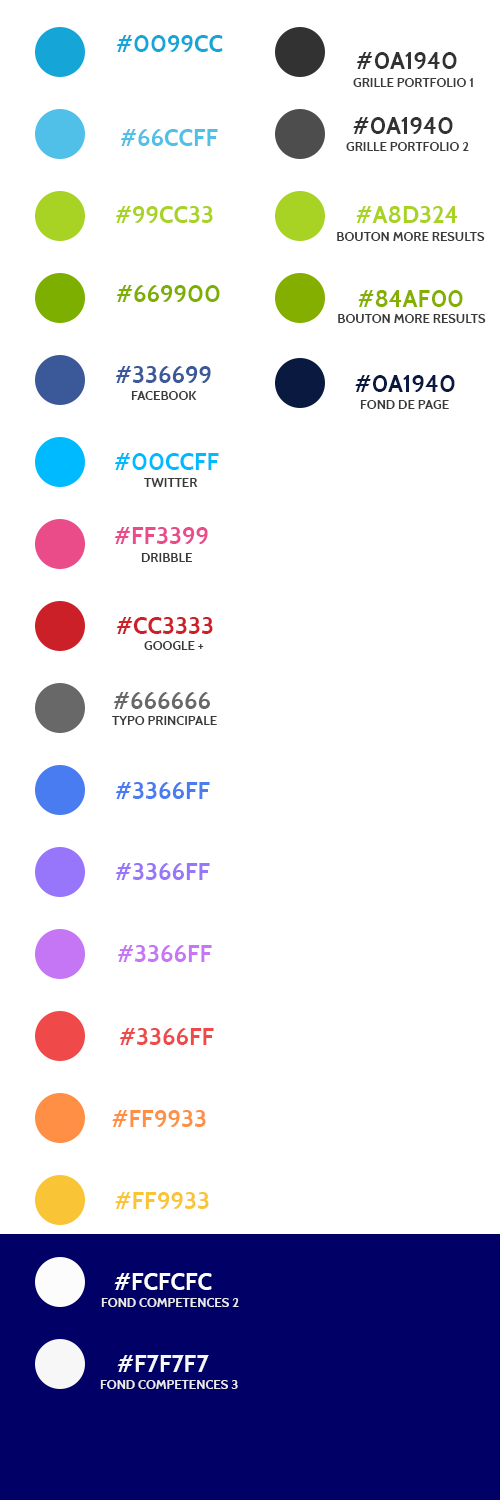
<style>
.page{position:relative;width:500px;height:1500px;background:#ffffff}
.page>*{position:absolute;margin:0}
.t1{font:24px "Cabin-Bold";color:#15a5d7;text-transform:uppercase}
.t2{font:24px "Cabin-Bold";color:#323232;text-transform:uppercase}
.t3{font:13px "Cabin-Bold";color:#3a3a3a;text-transform:uppercase}
.t4{font:24px "Cabin-Bold";color:#50c0e8;text-transform:uppercase}
.t5{font:24px "Cabin-Bold";color:#a8d324;text-transform:uppercase}
.t6{font:24px "Cabin-Bold";color:#7daf00;text-transform:uppercase}
.t7{font:24px "Cabin-Bold";color:#84af00;text-transform:uppercase}
.t8{font:24px "Cabin-Bold";color:#3b5999;text-transform:uppercase}
.t9{font:24px "Cabin-Bold";color:#0a1940;text-transform:uppercase}
.t10{font:24px "Cabin-Bold";color:#00baff;text-transform:uppercase}
.t11{font:24px "Cabin-Bold";color:#ea4c89;text-transform:uppercase}
.t12{font:24px "Cabin-Bold";color:#cb2028;text-transform:uppercase}
.t13{font:24px "Cabin-Bold";color:#686868;text-transform:uppercase}
.t14{font:24px "Cabin-Bold";color:#497cf1;text-transform:uppercase}
.t15{font:24px "Cabin-Bold";color:#9776fb;text-transform:uppercase}
.t16{font:24px "Cabin-Bold";color:#c576f5;text-transform:uppercase}
.t17{font:24px "Cabin-Bold";color:#ef4949;text-transform:uppercase}
.t18{font:24px "Cabin-Bold";color:#ff8f45;text-transform:uppercase}
.t19{font:24px "Cabin-Bold";color:#f9c436;text-transform:uppercase}
.t20{font:24px "Cabin-Bold";color:#fcfcfc;text-transform:uppercase}
.t21{font:13px "Cabin-Bold";color:#eaeaea;text-transform:uppercase}
.t22{font:24px "Cabin-Bold";color:#f7f7f7;text-transform:uppercase}
</style>
<div class="page">
<p class="t1" style="left:116px;top:35px;width:107px;height:17px">#0099cc</p>
<p class="t2" style="left:356px;top:52px;width:101px;height:17px">#0a1940</p>
<p class="t3" style="left:353px;top:78px;width:120px;height:9px">grille portfolio 1</p>
<p class="t2" style="left:353px;top:117px;width:100px;height:17px">#0a1940</p>
<p class="t4" style="left:120px;top:129px;width:98px;height:17px">#66ccff</p>
<p class="t3" style="left:346px;top:142px;width:123px;height:9px">grille portfolio 2</p>
<p class="t5" style="left:115px;top:206px;width:98px;height:17px">#99cc33</p>
<p class="t5" style="left:356px;top:206px;width:102px;height:17px">#a8d324</p>
<p class="t3" style="left:337px;top:232px;width:148px;height:9px">bouton more results</p>
<p class="t6" style="left:116px;top:285px;width:104px;height:17px">#669900</p>
<p class="t7" style="left:358px;top:290px;width:105px;height:17px">#84af00</p>
<p class="t3" style="left:338px;top:314px;width:148px;height:9px">bouton more results</p>
<p class="t8" style="left:115px;top:366px;width:96px;height:17px">#336699</p>
<p class="t9" style="left:355px;top:375px;width:100px;height:17px">#0a1940</p>
<p class="t3" style="left:131px;top:391px;width:66px;height:9px">facebook</p>
<p class="t3" style="left:360px;top:400px;width:89px;height:9px">Fond de page</p>
<p class="t10" style="left:114px;top:453px;width:105px;height:17px">#00ccff</p>
<p class="t3" style="left:144px;top:478px;width:54px;height:9px">twitter</p>
<p class="t11" style="left:114px;top:527px;width:94px;height:17px">#ff3399</p>
<p class="t3" style="left:141px;top:553px;width:52px;height:9px">dribble</p>
<p class="t12" style="left:116px;top:617px;width:97px;height:17px">#cc3333</p>
<p class="t3" style="left:144px;top:641px;width:60px;height:9px">google +</p>
<p class="t13" style="left:113px;top:692px;width:97px;height:17px">#666666</p>
<p class="t3" style="left:112px;top:716px;width:105px;height:9px">typo principale</p>
<p class="t14" style="left:115px;top:782px;width:95px;height:17px">#3366ff</p>
<p class="t15" style="left:115px;top:863px;width:95px;height:17px">#3366ff</p>
<p class="t16" style="left:117px;top:945px;width:95px;height:17px">#3366ff</p>
<p class="t17" style="left:119px;top:1028px;width:95px;height:17px">#3366ff</p>
<p class="t18" style="left:112px;top:1110px;width:94px;height:17px">#ff9933</p>
<p class="t19" style="left:115px;top:1192px;width:94px;height:17px">#ff9933</p>
<p class="t20" style="left:114px;top:1273px;width:98px;height:17px">#fcfcfc</p>
<p class="t21" style="left:101px;top:1298px;width:138px;height:9px">fond competences 2</p>
<p class="t22" style="left:117px;top:1355px;width:92px;height:17px">#f7f7f7</p>
<p class="t21" style="left:100px;top:1380px;width:138px;height:9px">fond competences 3</p>
</div>
